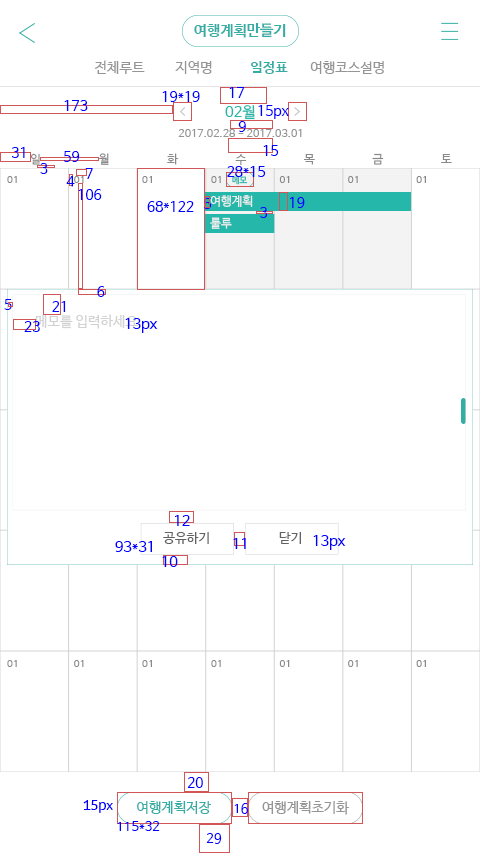
<style>
.page{position:relative;width:480px;height:853px;background:#ffffff}
.page>*{position:absolute;margin:0}
.t1{font:15px "NanumBarunGothicBold";color:#36ada4}
.t2{font:14px "NanumBarunGothic";color:#959595}
.t3{font:14px "NanumBarunGothicBold";color:#36ada4}
.t4{font:14px "NanumBarunGothic";color:#0000ff}
.t5{font:15px "NanumBarunGothic";color:#25b7aa}
.t6{font:11px "NanumBarunGothic";color:#959595}
.t7{font:11.8px "NanumBarunGothic";color:#898989}
.t8{font:10.4px "NanumBarunGothic";color:#898989}
.t9{font:8.8px "NanumBarunGothic";color:#25b7aa;scale:0.96 1}
.t10{font:12px "NanumBarunGothic";color:#efefef}
.t11{font:14px "NanumBarunGothic";color:#d2d2d2}
.t12{font:14.6px "NanumBarunGothic";color:#0000ff}
.t13{font:12.9px "NanumBarunGothic";letter-spacing:0.025em;color:#626262}
.t14{font:13px "MoebiusKorea-Regular";color:#0000ff}
.t15{font:14.1px "NanumBarunGothic";color:#36ada4}
.t16{font:13px "NanumBarunGothic";color:#0000ff}
.t17{font:14.1px "NanumBarunGothic";color:#959595}
</style>
<div class="page">
<p class="t1" style="left:194px;top:23px;width:92px;height:15px">여행계획만들기</p>
<p class="t2" style="left:94px;top:60px;width:51px;height:14px">전체루트</p>
<p class="t2" style="left:175px;top:61px;width:37px;height:13px">지역명</p>
<p class="t3" style="left:251px;top:61px;width:37px;height:13px">일정표</p>
<p class="t2" style="left:310px;top:61px;width:74px;height:13px">여행코스설명</p>
<p class="t4" style="left:229px;top:87px;width:15px;height:11px">17</p>
<p class="t4" style="left:64px;top:100px;width:24px;height:11px">173</p>
<p class="t4" style="left:162px;top:91px;width:38px;height:11px">19*19</p>
<p class="t5" style="left:225px;top:105px;width:30px;height:15px">02월</p>
<p class="t4" style="left:258px;top:105px;width:31px;height:14px">15px</p>
<p class="t4" style="left:238px;top:121px;width:8px;height:11px">9</p>
<p class="t6" style="left:178px;top:129px;width:124px;height:8px">2017.02.28 - 2017.03.01</p>
<p class="t4" style="left:12px;top:147px;width:13px;height:11px">31</p>
<p class="t4" style="left:263px;top:145px;width:16px;height:11px">15</p>
<p class="t7" style="left:30px;top:153px;width:10px;height:12px">일</p>
<p class="t4" style="left:63px;top:151px;width:17px;height:11px">59</p>
<p class="t7" style="left:99px;top:153px;width:10px;height:12px">월</p>
<p class="t7" style="left:167px;top:153px;width:12px;height:12px">화</p>
<p class="t7" style="left:235px;top:154px;width:11px;height:11px">수</p>
<p class="t7" style="left:304px;top:154px;width:11px;height:11px">목</p>
<p class="t7" style="left:372px;top:153px;width:12px;height:12px">금</p>
<p class="t7" style="left:441px;top:154px;width:11px;height:9px">토</p>
<p class="t4" style="left:40px;top:163px;width:8px;height:11px">3</p>
<p class="t4" style="left:85px;top:168px;width:8px;height:11px">7</p>
<p class="t4" style="left:227px;top:166px;width:39px;height:11px">28*15</p>
<p class="t8" style="left:7px;top:176px;width:10px;height:7px">01</p>
<p class="t4" style="left:66px;top:176px;width:9px;height:11px">4</p>
<p class="t8" style="left:74px;top:176px;width:10px;height:7px">01</p>
<p class="t8" style="left:142px;top:176px;width:10px;height:7px">01</p>
<p class="t8" style="left:211px;top:176px;width:10px;height:7px">01</p>
<p class="t9" style="left:232px;top:176px;width:16px;height:9px">메모</p>
<p class="t8" style="left:279px;top:176px;width:11px;height:7px">01</p>
<p class="t8" style="left:348px;top:176px;width:10px;height:7px">01</p>
<p class="t8" style="left:416px;top:176px;width:10px;height:7px">01</p>
<p class="t4" style="left:78px;top:189px;width:24px;height:11px">106</p>
<p class="t4" style="left:204px;top:198px;width:8px;height:11px">5</p>
<p class="t10" style="left:210px;top:195px;width:43px;height:12px">여행계획</p>
<p class="t4" style="left:290px;top:197px;width:15px;height:11px">19</p>
<p class="t4" style="left:147px;top:201px;width:47px;height:11px">68*122</p>
<p class="t4" style="left:260px;top:207px;width:8px;height:11px">3</p>
<p class="t10" style="left:210px;top:217px;width:22px;height:12px">룰루</p>
<p class="t4" style="left:97px;top:286px;width:8px;height:11px">6</p>
<p class="t4" style="left:4px;top:299px;width:8px;height:11px">5</p>
<p class="t4" style="left:52px;top:301px;width:14px;height:11px">21</p>
<p class="t11" style="left:35px;top:314px;width:103px;height:15px">메모를 입력하세요</p>
<p class="t12" style="left:125px;top:318px;width:33px;height:15px">13px</p>
<p class="t4" style="left:24px;top:321px;width:16px;height:11px">23</p>
<p class="t12" style="left:175px;top:515px;width:15px;height:11px">12</p>
<p class="t13" style="left:163px;top:532px;width:46px;height:12px">공유하기</p>
<p class="t13" style="left:279px;top:532px;width:22px;height:12px">닫기</p>
<p class="t12" style="left:115px;top:541px;width:37px;height:11px">93*31</p>
<p class="t12" style="left:233px;top:538px;width:13px;height:11px">11</p>
<p class="t12" style="left:313px;top:535px;width:33px;height:15px">13px</p>
<p class="t12" style="left:162px;top:556px;width:16px;height:11px">10</p>
<p class="t8" style="left:7px;top:660px;width:10px;height:7px">01</p>
<p class="t8" style="left:74px;top:660px;width:10px;height:7px">01</p>
<p class="t8" style="left:142px;top:660px;width:10px;height:7px">01</p>
<p class="t8" style="left:211px;top:660px;width:10px;height:7px">01</p>
<p class="t8" style="left:279px;top:660px;width:11px;height:7px">01</p>
<p class="t8" style="left:348px;top:660px;width:10px;height:7px">01</p>
<p class="t8" style="left:416px;top:660px;width:10px;height:7px">01</p>
<p class="t4" style="left:187px;top:777px;width:16px;height:11px">20</p>
<p class="t14" style="left:83px;top:800px;width:30px;height:13px">15px</p>
<p class="t15" style="left:137px;top:801px;width:74px;height:13px">여행계획저장</p>
<p class="t16" style="left:234px;top:803px;width:14px;height:11px">16</p>
<p class="t17" style="left:262px;top:801px;width:87px;height:14px">여행계획초기화</p>
<p class="t16" style="left:117px;top:821px;width:43px;height:10px">115*32</p>
<p class="t16" style="left:206px;top:833px;width:16px;height:11px">29</p>
</div>
